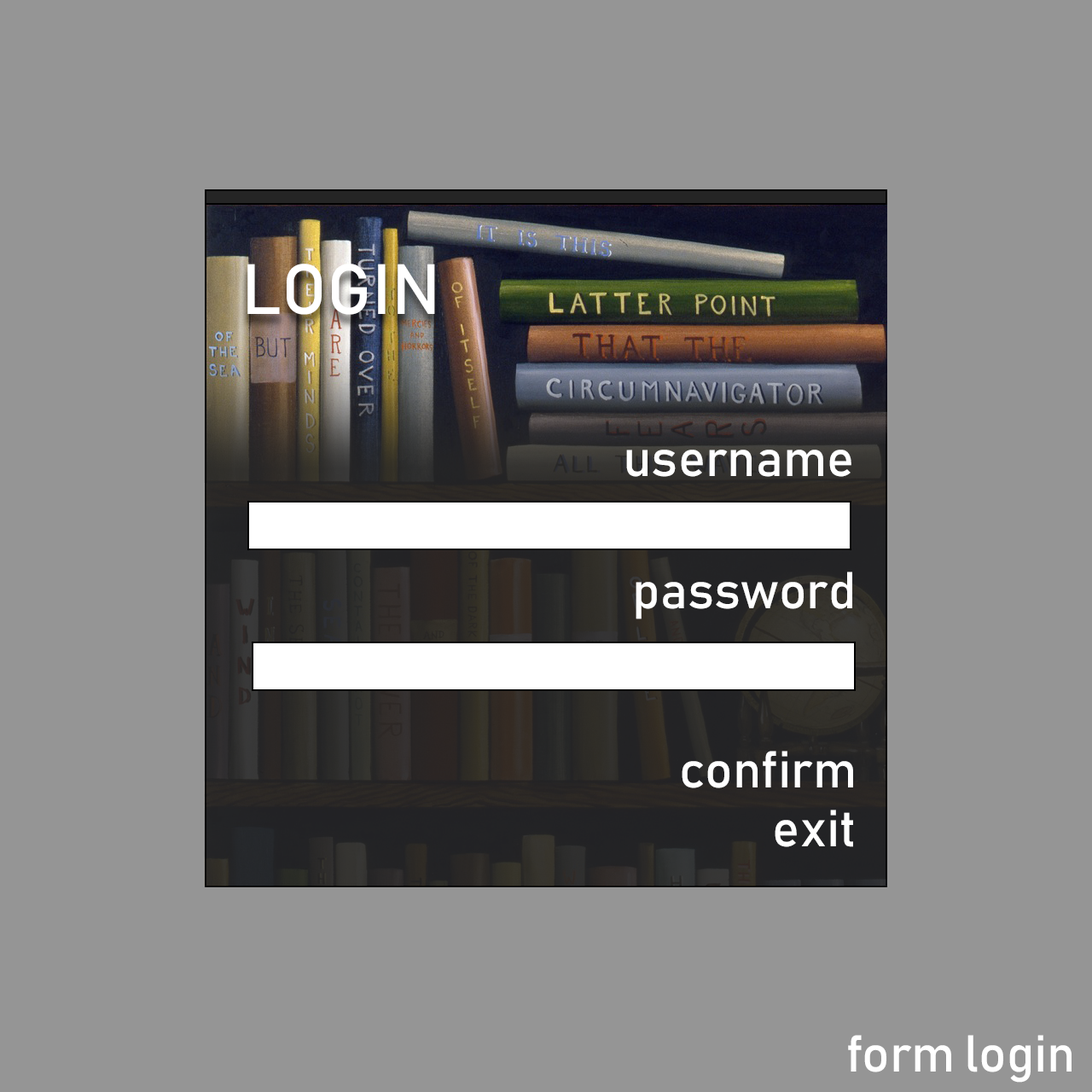
<style>
.page{position:relative;width:1092px;height:1092px;background:#959595}
.page>*{position:absolute;margin:0}
.t1{font:70px "Bahnschrift";color:#ffffff}
.t2{font:51.2px "Bahnschrift";color:#ffffff}
</style>
<div class="page">
<p class="t1" style="left:247px;top:264px;width:188px;height:51px">LOGIN</p>
<p class="t2" style="left:626px;top:450px;width:225px;height:27px">username</p>
<p class="t2" style="left:636px;top:572px;width:216px;height:47px">password</p>
<p class="t2" style="left:682px;top:751px;width:171px;height:37px">confirm</p>
<p class="t2" style="left:775px;top:810px;width:78px;height:37px">exit</p>
<p class="t2" style="left:848px;top:1035px;width:224px;height:48px">form login</p>
</div>
